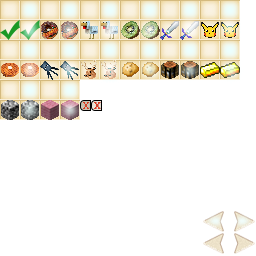
<style>
.page{position:relative;width:256px;height:256px;background:#ffffff}
.page>*{position:absolute;margin:0}
.t1{font:11px "CambriaMath";color:#da3c22;text-transform:uppercase}
</style>
<div class="page">
<p class="t1" style="left:83px;top:102px;width:6px;height:7px">x</p>
<p class="t1" style="left:94px;top:102px;width:6px;height:7px">x</p>
</div>
